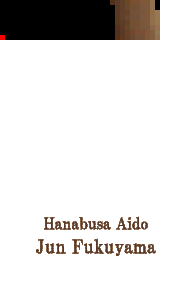
<style>
.page{position:relative;width:192px;height:296px;background:#ffffff}
.page>*{position:absolute;margin:0}
.t1{font:16px/24px "HGPMinchoB";color:#583828}
.t2{font:18.7px/24px "HGPMinchoB";color:#583828}
</style>
<div class="page">
<p class="t1" style="left:36px;top:216px;width:120px;height:40px;text-align:center">Hanabusa Aido<br><span class="t2">Jun Fukuyama</span></p>
</div>
